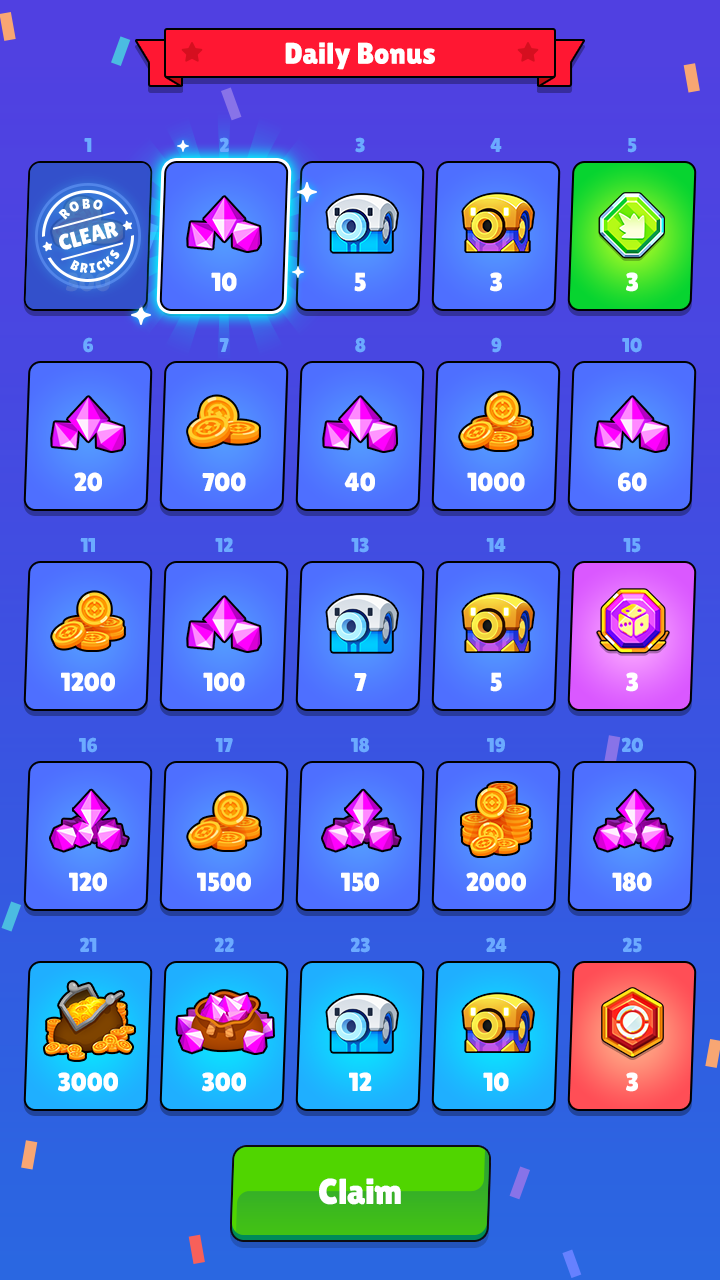
<style>
.page{position:relative;width:720px;height:1280px}
.page>*{position:absolute;margin:0}
.t1{font:30px "LilitaOne";color:#ffffff}
.t2{font:14px "LilitaOne";letter-spacing:0.1em;color:#ffffff;text-transform:uppercase}
.t3{font:22.3px "LilitaOne";color:#ffffff;text-transform:uppercase}
.t4{font:12.4px "HUMeninblack140";color:#ffffff;text-transform:uppercase}
.t5{font:13.6px "LilitaOne";letter-spacing:0.2em;color:#ffffff;text-transform:uppercase}
.t6{font:26px/200px "LilitaOne";color:#ffffff;text-transform:uppercase}
.t7{font:26px/200px "LilitaOne";color:#ffffff}
.t8{font:36px "LilitaOne";color:#ffffff}
</style>
<div class="page">
<p class="t1" style="left:285px;top:42px;width:150px;height:28px">Daily Bonus</p>
<p class="t2" style="left:58px;top:198px;width:45px;height:22px;rotate:-14deg">Robo</p>
<p class="t3" style="left:42px;top:220px;width:90px;height:32px;rotate:-15deg"><span class="t4">★   </span>clear   <span class="t4">★</span></p>
<p class="t5" style="left:70px;top:249px;width:50px;height:24px;rotate:-14deg">Bricks</p>
<p class="t6" style="left:58px;top:272px;width:60px;height:820px;text-align:center">300<br>20<br>1200<br>120<br>3000</p>
<p class="t6" style="left:197px;top:272px;width:54px;height:820px;text-align:center">10<br>700<br>100<br>1500<br>300</p>
<p class="t6" style="left:341px;top:272px;width:38px;height:819px;text-align:center">5<br>40<br>7<br>150<br>12</p>
<p class="t6" style="left:466px;top:272px;width:60px;height:820px;text-align:center">3<br>1000<br>5<br>2000<br>10</p>
<p class="t7" style="left:612px;top:272px;width:40px;height:820px;text-align:center">3<br>60<br>3<br>180<br>3</p>
<p class="t8" style="left:319px;top:1178px;width:82px;height:27px">Claim</p>
</div>
